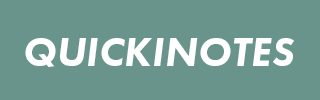
<style>
.page{position:relative;width:320px;height:100px;background:#69948b}
.page>*{position:absolute;margin:0}
.t1{font:41.7px "FuturaPT-HeavyObl";color:#ffffff}
</style>
<div class="page">
<p class="t1" style="left:25px;top:38px;width:269px;height:29px">QUICKINOTES</p>
</div>
